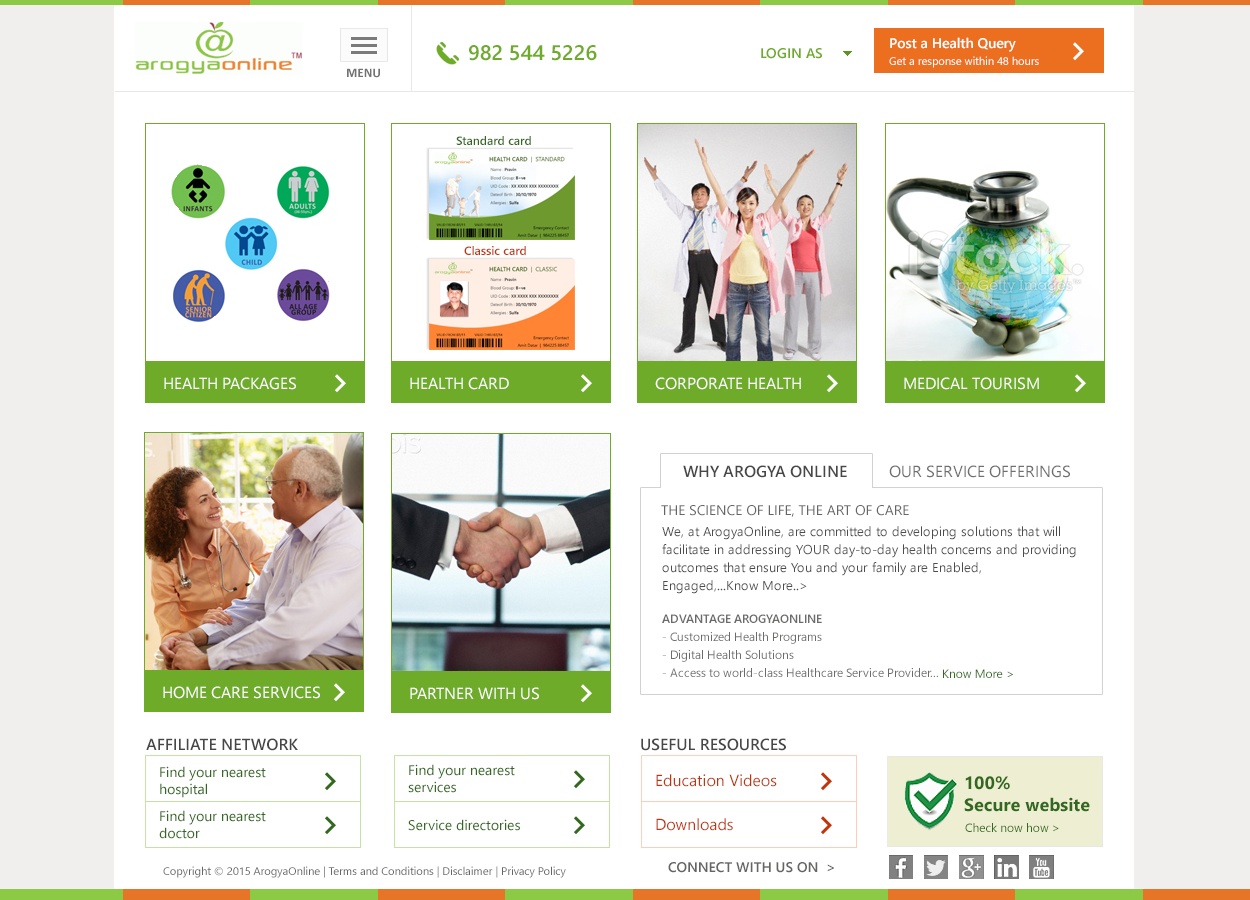
<style>
.page{position:relative;width:1250px;height:900px;background:#ffffff}
.page>*{position:absolute;margin:0}
.t1{font:14px "SegoeUI-Semibold";color:#ffffff}
.t2{font:21px "SegoeUI-Semibold";color:#6eab29}
.t3{font:14px "SegoeUI-Semibold";color:#6eab29;text-transform:uppercase}
.t4{font:11px "SegoeUI";color:#ffffff}
.t5{font:13px "Calibri-Bold";color:#727272;text-transform:uppercase}
.t6{font:16px "SegoeUI-Semibold";color:#474747;text-transform:uppercase}
.t7{font:16px "SegoeUI";color:#6f6f6f;text-transform:uppercase}
.t8{font:14px "SegoeUI";color:#656564}
.t9{font:13px/18px "SegoeUI";color:#4c4c4b}
.t10{font:12px/18px "SegoeUI";color:#6b6b6a}
.t11{font:12px/18px "SegoeUI-Semibold";color:#6b6b6a}
.t12{font:12px "SegoeUI";color:#33691e}
.t13{font:16px "SegoeUI-Semibold";color:#474747}
.t14{font:14px "SegoeUI";color:#33691e}
.t15{font:16px "SegoeUI";color:#bf360c}
.t16{font:18px "SegoeUI-Bold";color:#33691e}
.t17{font:11px "SegoeUI";color:#656564}
.t18{font:14px "SegoeUI-Semibold";color:#656564}
</style>
<div class="page">
<p class="t1" style="left:890px;top:37px;width:126px;height:15px">Post a Health Query</p>
<p class="t2" style="left:469px;top:45px;width:128px;height:16px">982 544 5226</p>
<p class="t3" style="left:761px;top:48px;width:61px;height:11px">Login As</p>
<p class="t4" style="left:889px;top:56px;width:150px;height:12px">Get a response within 48 hours</p>
<p class="t5" style="left:347px;top:68px;width:33px;height:10px">Menu</p>
<p class="t6" style="left:683px;top:465px;width:164px;height:13px">WHy Arogya Online</p>
<p class="t7" style="left:889px;top:465px;width:181px;height:13px">our service offerings</p>
<p class="t8" style="left:661px;top:505px;width:248px;height:12px">THE SCIENCE OF LIFE, THE ART OF CARE</p>
<p class="t9" style="left:662px;top:526px;width:414px;height:68px">We, at ArogyaOnline, are committed to developing solutions that will facilitate in addressing YOUR day-to-day health concerns and providing outcomes that ensure You and your family are Enabled, Engaged,...Know More..&gt;</p>
<p class="t10" style="left:662px;top:614px;width:276px;height:63px"><span class="t11">ADVANTAGE AROGYAONLINE<br></span>- Customized Health Programs<br>- Digital Health Solutions<br>- Access to world-class Healthcare Service Provider...</p>
<p class="t12" style="left:943px;top:669px;width:70px;height:9px">Know More &gt;</p>
<p class="t13" style="left:146px;top:738px;width:152px;height:13px">AFFILIATE NETWORK</p>
<p class="t6" style="left:641px;top:738px;width:145px;height:13px">useful resources</p>
<p class="t14" style="left:160px;top:766px;width:106px;height:32px">Find your nearest <br>hospital</p>
<p class="t14" style="left:408px;top:764px;width:107px;height:29px">Find your nearest <br>services</p>
<p class="t15" style="left:656px;top:774px;width:121px;height:13px">Education Videos</p>
<p class="t16" style="left:964px;top:776px;width:126px;height:36px">100% <br>Secure website</p>
<p class="t14" style="left:159px;top:810px;width:107px;height:29px">Find your nearest <br>doctor</p>
<p class="t14" style="left:408px;top:819px;width:112px;height:12px">Service directories</p>
<p class="t15" style="left:656px;top:818px;width:77px;height:13px">Downloads</p>
<p class="t12" style="left:965px;top:823px;width:94px;height:9px">Check now how &gt;</p>
<p class="t17" style="left:163px;top:866px;width:403px;height:12px">Copyright © 2015 ArogyaOnline | Terms and Conditions | Disclaimer | Privacy Policy</p>
<p class="t18" style="left:668px;top:862px;width:166px;height:11px">CONNECT WITH US ON  &gt;</p>
</div>
